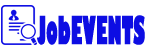
<style>
.page{position:relative;width:148px;height:50px;background:#ffffff}
.page>*{position:absolute;margin:0}
.t1{font:38.1px "GillSans-UltraBold";color:#0d0de3;scale:0.43 1}
</style>
<div class="page">
<p class="t1" style="left:37px;top:15px;width:108px;height:30px">JobEVENTS</p>
</div>
